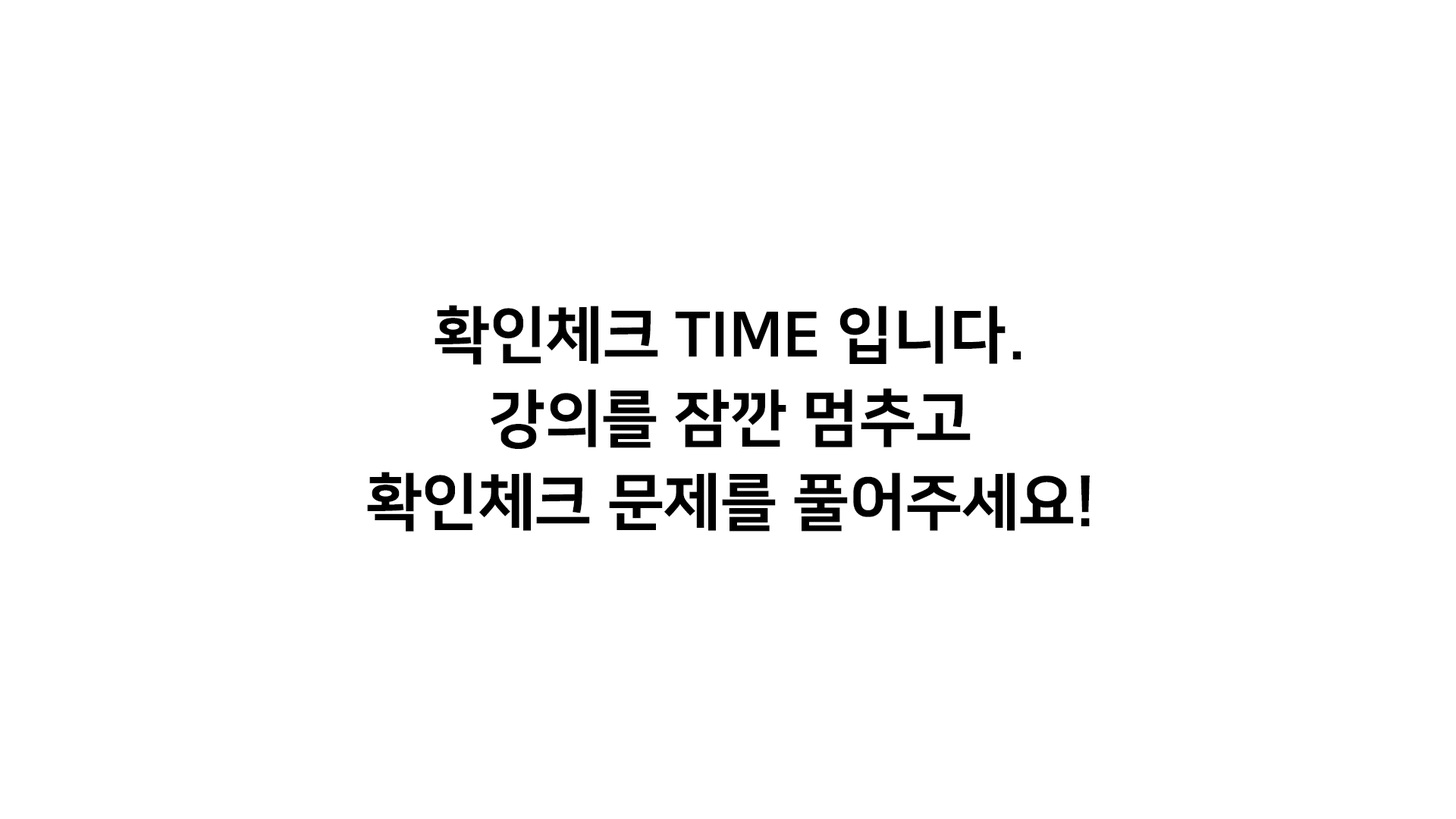
<style>
.page{position:relative;width:1456px;height:819px;background:#ffffff}
.page>*{position:absolute;margin:0}
.t1{font:62.2px/83.4px "NanumSquareEB";color:#000000}
</style>
<div class="page">
<p class="t1" style="left:367px;top:305px;width:723px;height:227px;text-align:center">확인체크 TIME 입니다.<br>강의를 잠깐 멈추고<br>확인체크 문제를 풀어주세요!</p>
</div>
